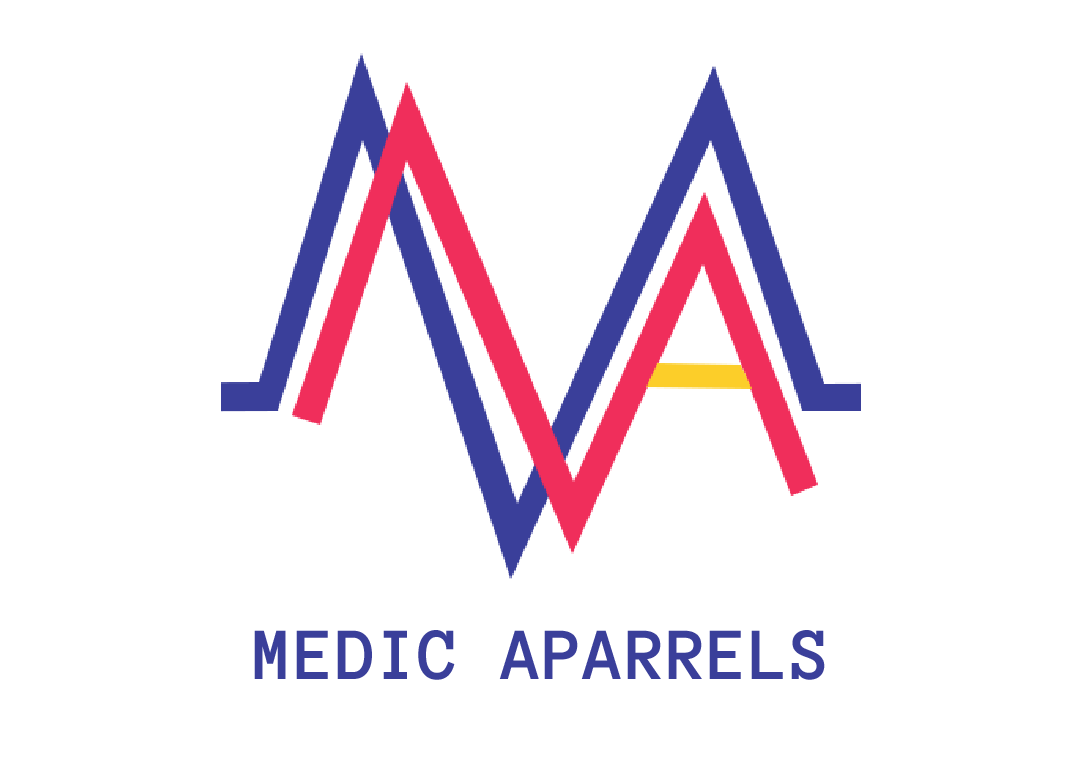
<style>
.page{position:relative;width:1080px;height:757px;background:#ffffff}
.page>*{position:absolute;margin:0}
.t1{font:75.8px "AnonymousPro-Bold";color:#3a3f9a;text-transform:uppercase}
</style>
<div class="page">
<p class="t1" style="left:254px;top:630px;width:571px;height:50px">MEDIC APARRELS</p>
</div>
